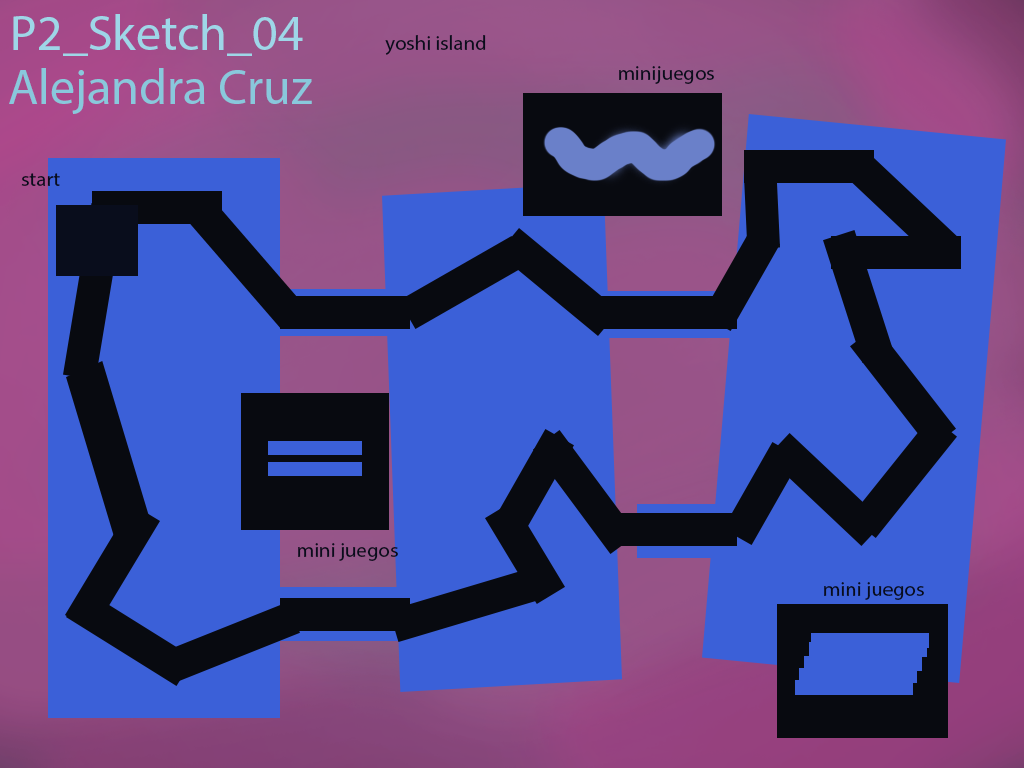
<style>
.page{position:relative;width:1024px;height:768px;background:#3b60d8}
.page>*{position:absolute;margin:0}
.t1{font:50px "MyriadPro-Regular";color:#9ed6e8}
.t2{font:20.8px "MyriadPro-Regular";color:#090d1c}
.t3{font:12px "MyriadPro-Regular";color:#89c8dc}
</style>
<div class="page">
<p class="t1" style="left:13px;top:14px;width:290px;height:42px">P2_Sketch_04</p>
<p class="t2" style="left:385px;top:35px;width:101px;height:20px">yoshi island</p>
<p class="t3" style="left:9px;top:68px;width:303px;height:46px">Alejandra Cruz</p>
<p class="t2" style="left:619px;top:66px;width:95px;height:18px">minijuegos</p>
<p class="t2" style="left:21px;top:173px;width:39px;height:13px">start</p>
<p class="t2" style="left:298px;top:543px;width:100px;height:18px">mini juegos</p>
<p class="t2" style="left:824px;top:582px;width:100px;height:18px">mini juegos</p>
</div>
